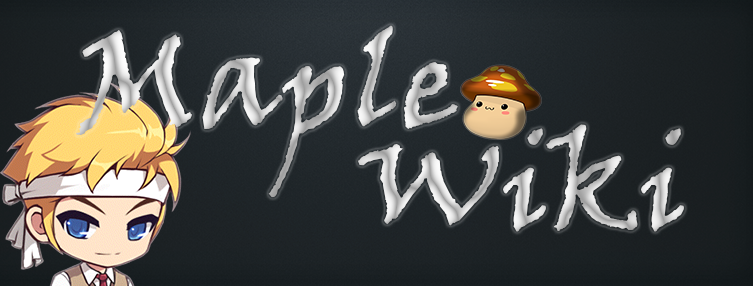
<style>
.page{position:relative;width:753px;height:286px}
.page>*{position:absolute;margin:0}
.t1{font:130.4px "VinerHandITC"}
.t2{font:136.1px "VinerHandITC"}
</style>
<div class="page">
<p class="t1" style="left:76px;top:25px;width:382px;height:173px"><span class="t2">M</span>aple</p>
<p class="t1" style="left:357px;top:124px;width:327px;height:108px">Wiki</p>
</div>
